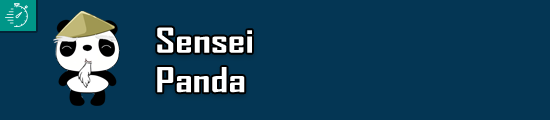
<style>
.page{position:relative;width:550px;height:120px;background:#043654}
.page>*{position:absolute;margin:0}
.t1{font:32.9px "AgencyFB-Bold";color:#ffffff;scale:1.33 1}
</style>
<div class="page">
<p class="t1" style="left:157px;top:27px;width:95px;height:66px">Sensei <br>Panda</p>
</div>
